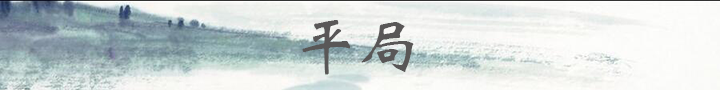
<style>
.page{position:relative;width:720px;height:90px}
.page>*{position:absolute;margin:0}
.t1{font:64px "STXinwei";color:#595757}
</style>
<div class="page">
<p class="t1" style="left:302px;top:20px;width:112px;height:55px">平局</p>
</div>
